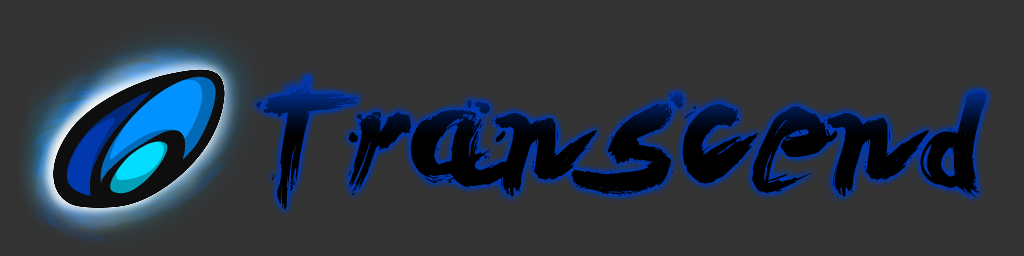
<style>
.page{position:relative;width:1024px;height:256px;background:#333333}
.page>*{position:absolute;margin:0}
.t1{font:150px "LeviBrush";color:#000000}
</style>
<div class="page">
<p class="t1" style="left:256px;top:76px;width:731px;height:134px">Transcend</p>
</div>
